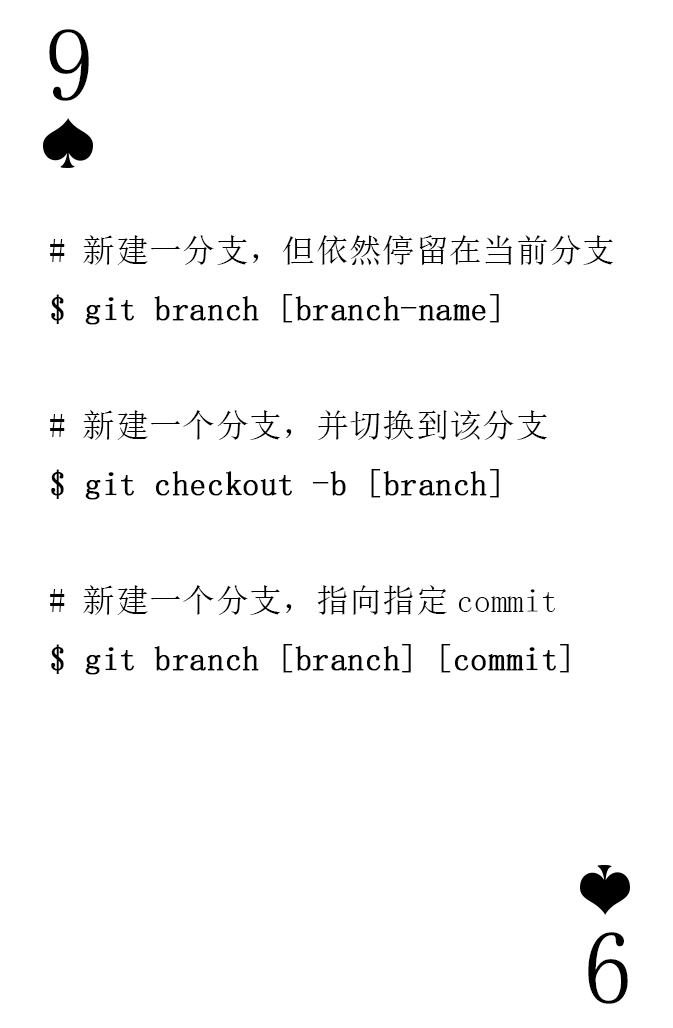
<style>
.page{position:relative;width:673px;height:1028px;background:#ffffff}
.page>*{position:absolute;margin:0}
.t1{font:104.2px "SimSun-ExtB";color:#010101;scale:0.93 1}
.t2{font:33.3px "SimSun";color:#000000;font-weight:bold}
.t3{font:33.3px "SimSun";color:#000000}
</style>
<div class="page">
<p class="t1" style="left:49px;top:29px;width:40px;height:72px">9</p>
<p class="t2" style="left:50px;top:235px;width:564px;height:440px"><span class="t3"># 新建一分支，但依然停留在当前分支<br></span>$ git branch [branch-name]<br><span class="t3"><br># 新建一个分支，并切换到该分支<br></span>$ git checkout -b [branch]<br><span class="t3"><br># 新建一个分支，指向指定commit<br></span>$ git branch [branch] [commit]</p>
<p class="t1" style="left:588px;top:932px;width:40px;height:72px;rotate:180deg">9</p>
</div>
